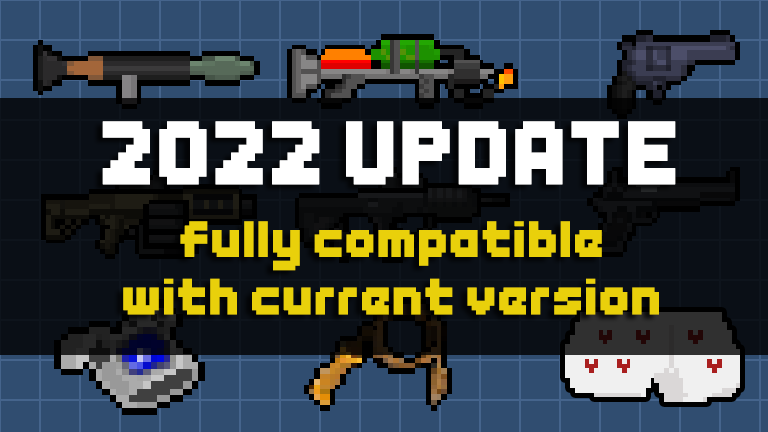
<style>
.page{position:relative;width:768px;height:432px;background:#304d70}
.page>*{position:absolute;margin:0}
.t1{font:85.8px "Endless-Boss-Battle";color:#ffffff;font-weight:bold}
.t2{font:48.5px "Endless-Boss-Battle";color:#e9d00b;font-weight:bold}
</style>
<div class="page">
<p class="t1" style="left:102px;top:121px;width:574px;height:64px">2022 UPDATE</p>
<p class="t2" style="left:123px;top:221px;width:536px;height:94px;text-align:center">fully compatible<br>with current version</p>
</div>
